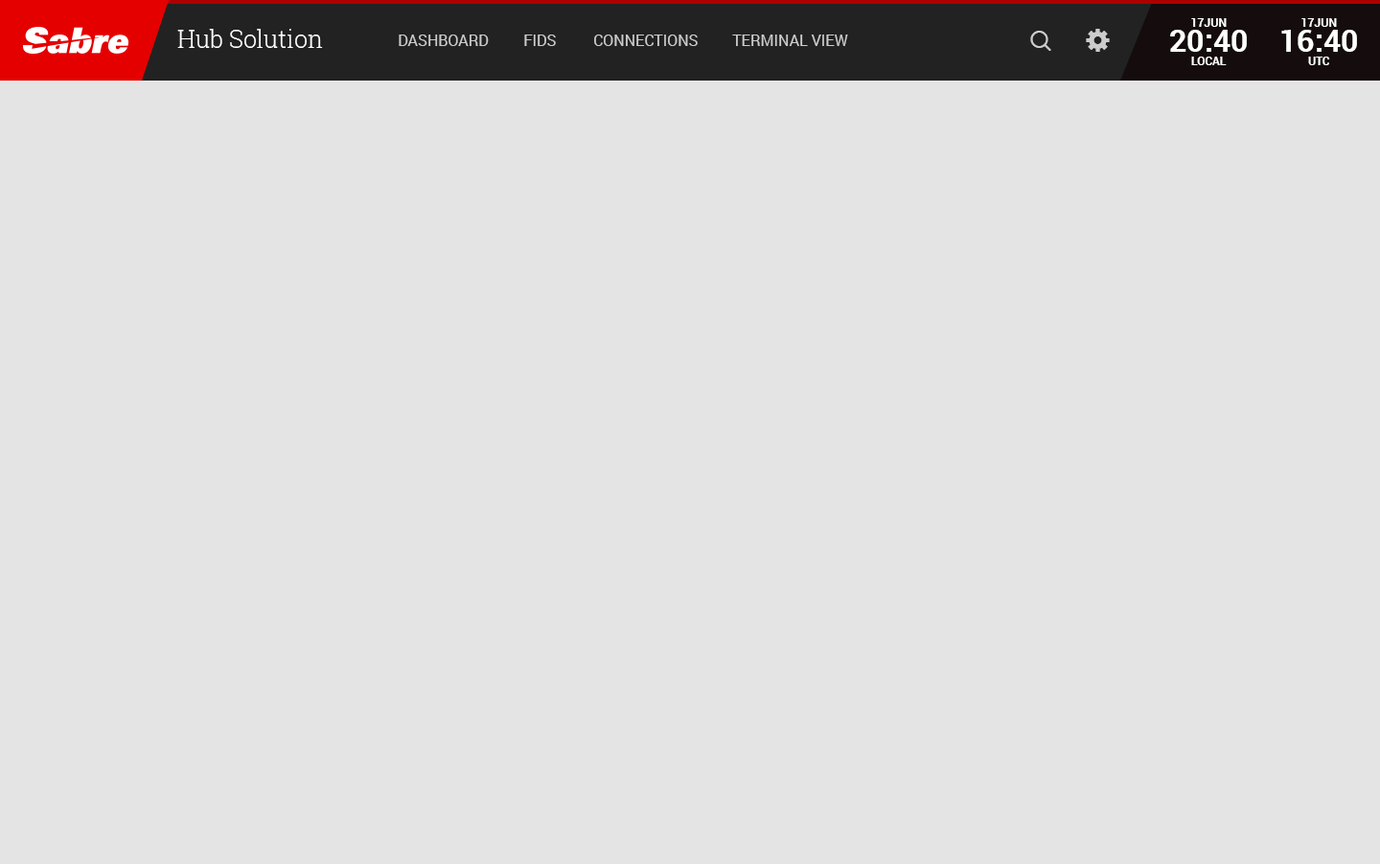
<style>
.page{position:relative;width:1380px;height:864px;background:#e4e4e4}
.page>*{position:absolute;margin:0}
.t1{font:24px "RobotoSlab-Light";color:#ffffff}
.t2{font:30.7px "Roboto-Bold";color:#ffffff}
.t3{font:11.5px "Roboto-Bold";color:#ffffff;text-transform:uppercase}
.t4{font:15.3px "Roboto-Regular";color:#cccccc;text-transform:uppercase}
.t5{font:11.5px "Roboto-Bold";color:#ffffff}
</style>
<div class="page">
<p class="t1" style="left:177px;top:29px;width:146px;height:19px">Hub Solution</p>
<p class="t2" style="left:1171px;top:30px;width:76px;height:22px">20:40</p>
<p class="t3" style="left:1192px;top:18px;width:35px;height:9px">17Jun</p>
<p class="t2" style="left:1282px;top:30px;width:75px;height:22px">16:40</p>
<p class="t3" style="left:1302px;top:18px;width:35px;height:9px">17Jun</p>
<p class="t4" style="left:399px;top:35px;width:90px;height:11px">Dashboard</p>
<p class="t4" style="left:524px;top:35px;width:32px;height:11px">FIDS</p>
<p class="t4" style="left:594px;top:35px;width:104px;height:11px">Connections</p>
<p class="t4" style="left:732px;top:35px;width:116px;height:11px">Terminal View</p>
<p class="t3" style="left:1192px;top:57px;width:35px;height:8px">local</p>
<p class="t5" style="left:1309px;top:57px;width:22px;height:8px">UTC</p>
</div>
